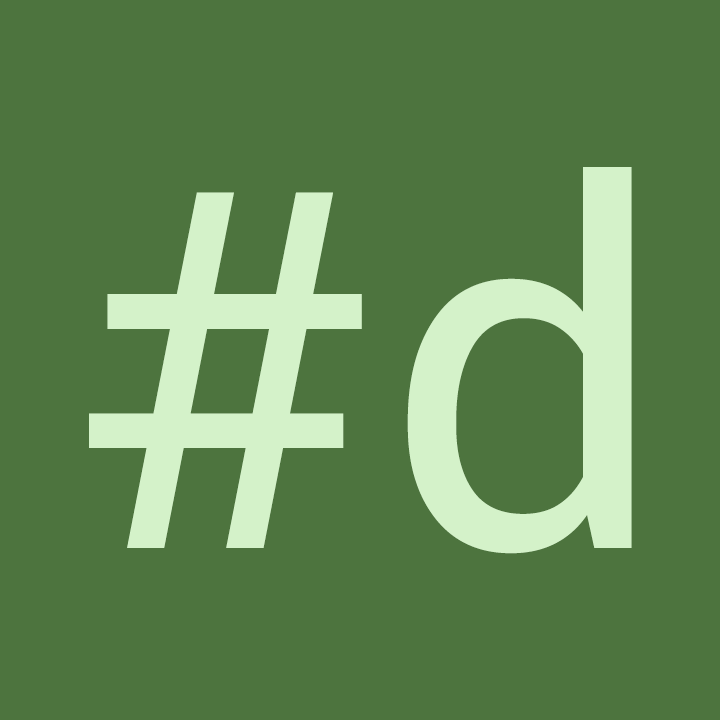
<style>
.page{position:relative;width:720px;height:720px;background:#4d743e}
.page>*{position:absolute;margin:0}
.t1{font:500px "Roboto-Regular";color:#d4f2c9}
</style>
<div class="page">
<p class="t1" style="left:89px;top:167px;width:543px;height:387px">#d</p>
</div>
